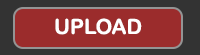
<style>
.page{position:relative;width:200px;height:55px;background:#9b2c2c}
.page>*{position:absolute;margin:0}
.t1{font:21px "ArialRoundedMTBold";color:#ffffff}
</style>
<div class="page">
<p class="t1" style="left:55px;top:18px;width:87px;height:17px">UPLOAD</p>
</div>
